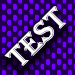
<style>
.page{position:relative;width:75px;height:75px;background:#21004b}
.page>*{position:absolute;margin:0}
.t1{font:30px "Algerian";color:#ffffff}
</style>
<div class="page">
<p class="t1" style="left:4px;top:6px;width:62px;height:60px;rotate:-45deg">TEST</p>
</div>
